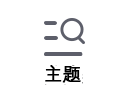
<style>
.page{position:relative;width:130px;height:100px;background:#ffffff}
.page>*{position:absolute;margin:0}
.t1{font:18px "STHeitiSC-Light";color:#000000;font-weight:bold}
</style>
<div class="page">
<p class="t1" style="left:45px;top:65px;width:36px;height:18px">主题</p>
</div>
